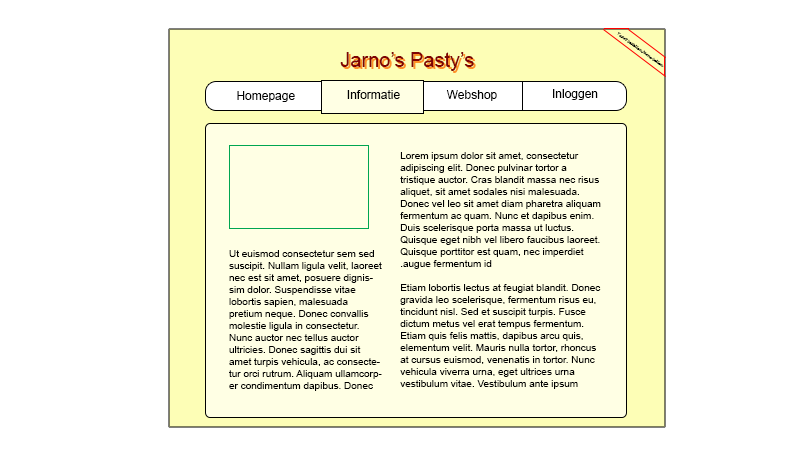
<style>
.page{position:relative;width:800px;height:450px;background:#ffffff}
.page>*{position:absolute;margin:0}
.t1{font:3.5px "LucidaHandwriting-Italic";color:#000000}
.t2{font:20px "ArialMT";color:#7f0303}
.t3{font:20px "ArialMT";color:#ff9227}
.t4{font:12px "ArialMT";color:#000000}
.t5{font:10px "ArialMT";color:#000000}
</style>
<div class="page">
<p class="t1" style="left:617px;top:32px;width:47px;height:35px;rotate:36deg">Taart bestellen Jarno bellen</p>
<p class="t2" style="left:340px;top:52px;width:134px;height:19px">Jarno’s Pasty’s</p>
<p class="t3" style="left:342px;top:54px;width:134px;height:19px">Jarno’s Pasty’s</p>
<p class="t4" style="left:553px;top:89px;width:45px;height:11px">Inloggen</p>
<p class="t4" style="left:237px;top:91px;width:58px;height:11px">Homepage</p>
<p class="t4" style="left:347px;top:90px;width:53px;height:9px">Informatie</p>
<p class="t4" style="left:446px;top:90px;width:51px;height:11px">Webshop</p>
<p class="t5" style="left:400px;top:152px;width:201px;height:237px;text-align:right">Lorem ipsum dolor sit amet, consectetur adipiscing elit. Donec pulvinar tortor a tristique auctor. Cras blandit massa nec risus aliquet, sit amet sodales nisi malesuada. Donec vel leo sit amet diam pharetra aliquam fermentum ac quam. Nunc et dapibus enim. Duis scelerisque porta massa ut luctus. Quisque eget nibh vel libero faucibus laoreet. Quisque porttitor est quam, nec imperdiet augue fermentum id.<br><br>Etiam lobortis lectus at feugiat blandit. Donec gravida leo scelerisque, fermentum risus eu, tincidunt nisl. Sed et suscipit turpis. Fusce dictum metus vel erat tempus fermentum. Etiam quis felis mattis, dapibus arcu quis, elementum velit. Mauris nulla tortor, rhoncus at cursus euismod, venenatis in tortor. Nunc vehicula viverra urna, eget ultrices urna vestibulum vitae. Vestibulum ante ipsum primis in faucibus orci luctus et ultrices posuere cubilia Curae;</p>
<p class="t5" style="left:229px;top:250px;width:153px;height:141px;text-align:right">Ut euismod consectetur sem sed suscipit. Nullam ligula velit, laoreet nec est sit amet, posuere dignissim dolor. Suspendisse vitae lobortis sapien, malesuada pretium neque. Donec convallis molestie ligula in consectetur. Nunc auctor nec tellus auctor ultricies. Donec sagittis dui sit amet turpis vehicula, ac consectetur orci rutrum. Aliquam ullamcorper condimentum dapibus. Donec ornare id ipsum quis dignissim. Aliquam erat volutpat. Etiam commodo vitae purus pellentesque elementum. Praesent ullamcorper velit eget elit mattis congue.</p>
</div>
